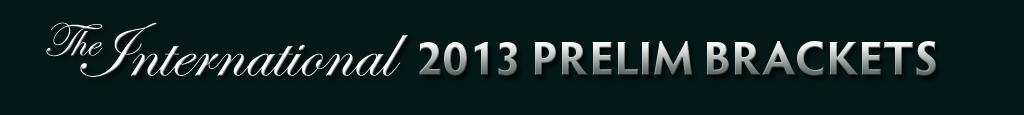
<style>
.page{position:relative;width:1024px;height:115px;background:#031917}
.page>*{position:absolute;margin:0}
.t1{font:48px "EdwardianScriptITC"}
.t2{font:80px "EdwardianScriptITC";color:#ffffff}
.t3{font:48px "HypatiaSansPro-Bold"}
</style>
<div class="page">
<p class="t1" style="left:46px;top:22px;width:57px;height:35px">The</p>
<p class="t2" style="left:80px;top:22px;width:328px;height:55px">International</p>
<p class="t3" style="left:419px;top:41px;width:517px;height:35px">2013 PRELIM BRACKETS</p>
</div>
